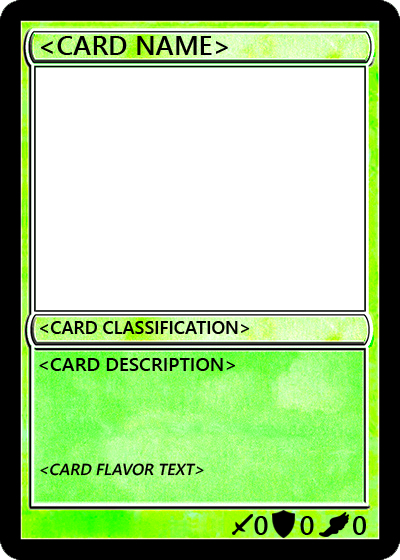
<style>
.page{position:relative;width:400px;height:560px;background:#ffffff}
.page>*{position:absolute;margin:0}
.t1{font:27px "YuGothicUI-Semibold";color:#000000}
.t2{font:18px "YuGothicUI-Semibold";color:#000000}
.t3{font:19px "YuGothicUI-Semibold";color:#000000}
.t4{font:16px "YuGothicUI-Semibold";color:#000000;font-style:italic}
</style>
<div class="page">
<p class="t1" style="left:41px;top:36px;width:187px;height:19px">&lt;CARD NAME&gt;</p>
<p class="t2" style="left:40px;top:321px;width:210px;height:13px">&lt;CARD CLASSIFICATION&gt;</p>
<p class="t3" style="left:39px;top:358px;width:196px;height:13px">&lt;CARD DESCRIPTION&gt;</p>
<p class="t4" style="left:40px;top:463px;width:164px;height:13px">&lt;CARD FLAVOR TEXT&gt;</p>
<p class="t1" style="left:254px;top:516px;width:14px;height:19px">0</p>
<p class="t1" style="left:300px;top:516px;width:14px;height:19px">0</p>
<p class="t1" style="left:353px;top:516px;width:13px;height:19px">0</p>
</div>
